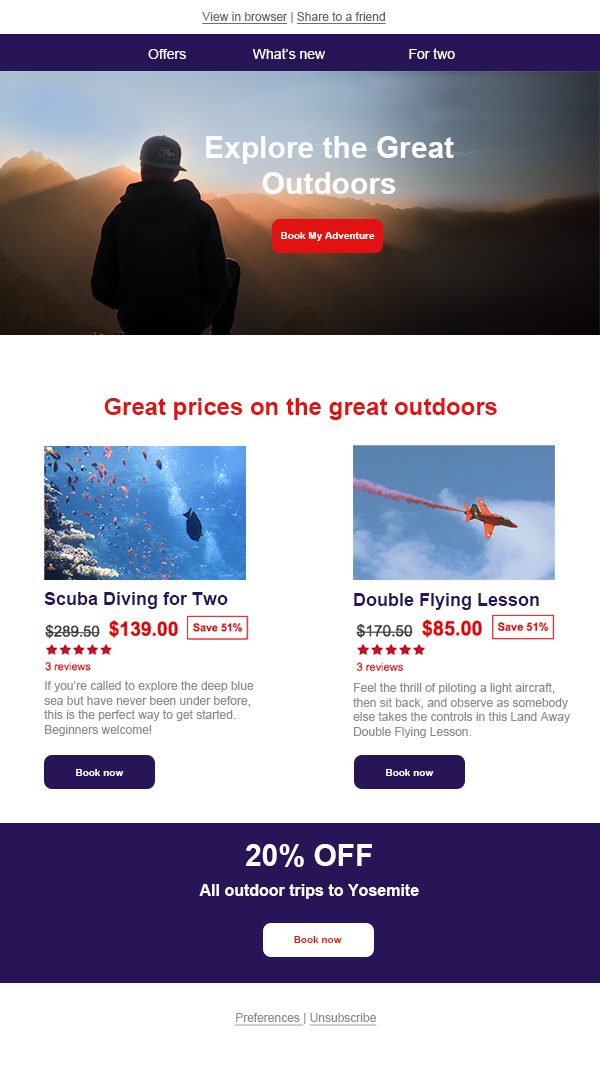
<style>
.page{position:relative;width:600px;height:1080px;background:#ffffff}
.page>*{position:absolute;margin:0}
.t1{font:12px "ArialMT";color:#646262;text-decoration:underline}
.t2{font:12px "ArialMT";color:#646262}
.t3{font:14px "ArialMT";color:#ffffff}
.t4{font:30px "Arial-BoldMT";color:#ffffff}
.t5{font:10px "Arial-BoldMT";color:#ffffff}
.t6{font:24px "Arial-BoldMT";color:#e31212}
.t7{font:18px "Arial-BoldMT";color:#281557}
.t8{font:12px "ArialMT";color:#8b8b8b}
.t9{font:16px "Arial-BoldMT";color:#ffffff}
.t10{font:10px "Arial-BoldMT";color:#e31212}
.t11{font:12px "ArialMT";color:#8b8b8b;text-decoration:underline}
</style>
<div class="page">
<p class="t1" style="left:202px;top:12px;width:184px;height:12px">View in browser<span class="t2"> | </span>Share to a friend</p>
<p class="t3" style="left:148px;top:49px;width:38px;height:10px">Offers</p>
<p class="t3" style="left:252px;top:48px;width:73px;height:11px">What’s new</p>
<p class="t3" style="left:409px;top:48px;width:46px;height:11px">For two</p>
<p class="t4" style="left:206px;top:136px;width:248px;height:58px;text-align:center">Explore the Great<br>Outdoors</p>
<p class="t5" style="left:281px;top:232px;width:94px;height:9px">Book My Adventure</p>
<p class="t6" style="left:104px;top:398px;width:393px;height:22px">Great prices on the great outdoors</p>
<p class="t7" style="left:44px;top:592px;width:184px;height:17px">Scuba Diving for Two</p>
<p class="t7" style="left:354px;top:593px;width:185px;height:17px">Double Flying Lesson</p>
<p class="t8" style="left:44px;top:681px;width:210px;height:55px">If you’re called to explore the deep blue<br>sea but have never been under before,<br>this is the perfect way to get started.<br>Beginners welcome!</p>
<p class="t8" style="left:353px;top:683px;width:217px;height:55px">Feel the thrill of piloting a light aircraft,<br>then sit back, and observe as somebody<br>else takes the controls in this Land Away<br>Double Flying Lesson.</p>
<p class="t5" style="left:76px;top:769px;width:48px;height:7px">Book now</p>
<p class="t5" style="left:386px;top:769px;width:48px;height:7px">Book now</p>
<p class="t4" style="left:245px;top:844px;width:127px;height:23px">20% OFF</p>
<p class="t9" style="left:199px;top:884px;width:220px;height:15px">All outdoor trips to Yosemite</p>
<p class="t10" style="left:294px;top:936px;width:48px;height:7px">Book now</p>
<p class="t11" style="left:235px;top:1013px;width:142px;height:13px">Preferences <span class="t8">| </span>Unsubscribe</p>
</div>
